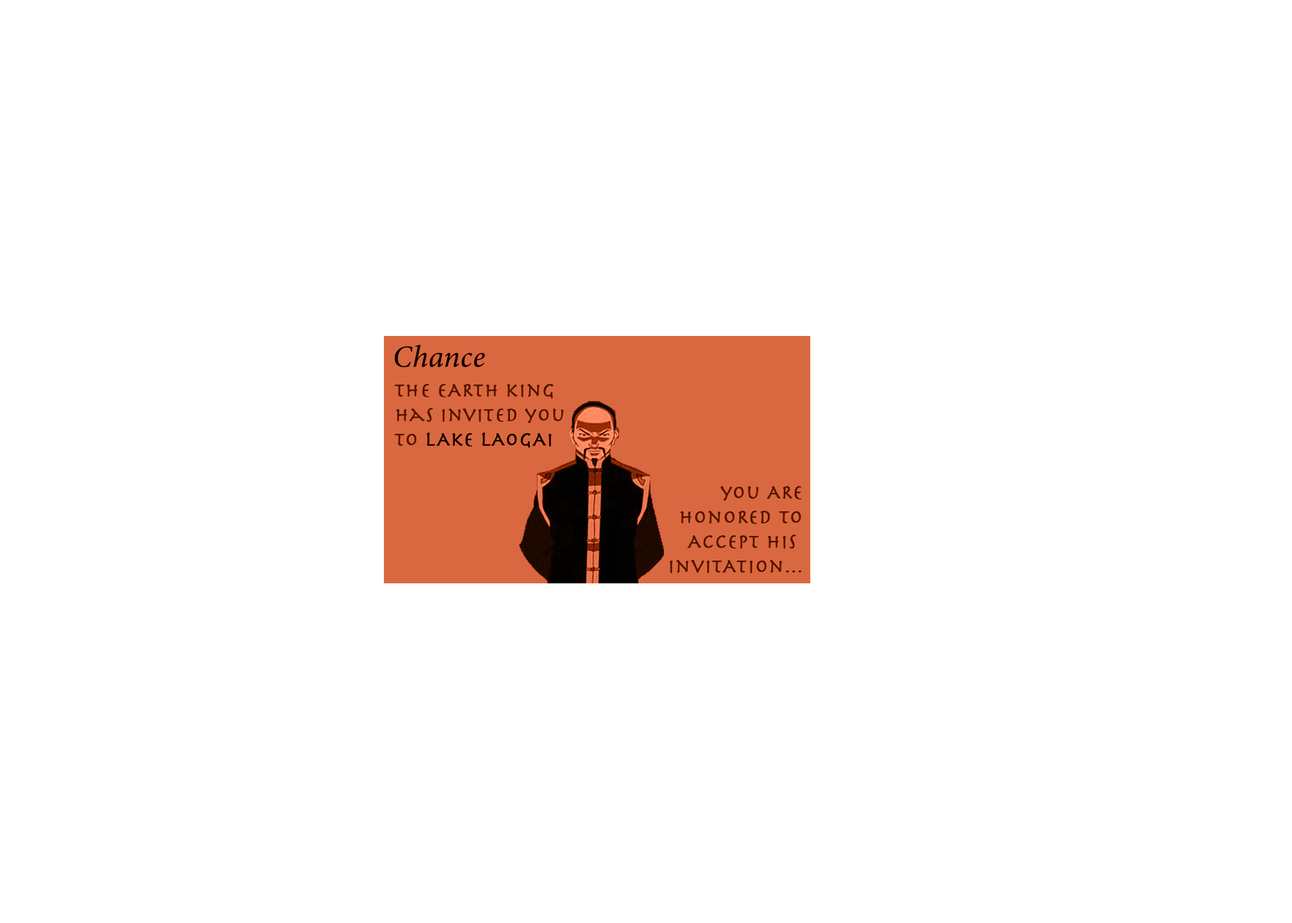
<style>
.page{position:relative;width:1292px;height:923px;background:#ffffff}
.page>*{position:absolute;margin:0}
.t1{font:30.8px "MinionConceptItalic-MediumItalic";color:#000000;font-weight:bold}
.t2{font:20.5px "Herculanum";color:#4e1501;font-weight:bold}
</style>
<div class="page">
<p class="t1" style="left:394px;top:345px;width:91px;height:22px">Chance</p>
<p class="t2" style="left:394px;top:384px;width:170px;height:64px">the eARth king <br>has invited you<br>to lAke lAogAi</p>
<p class="t2" style="left:669px;top:486px;width:133px;height:87px;text-align:right">you ARe<br>honoRed to<br>Accept his <br>invitAtion...</p>
</div>
